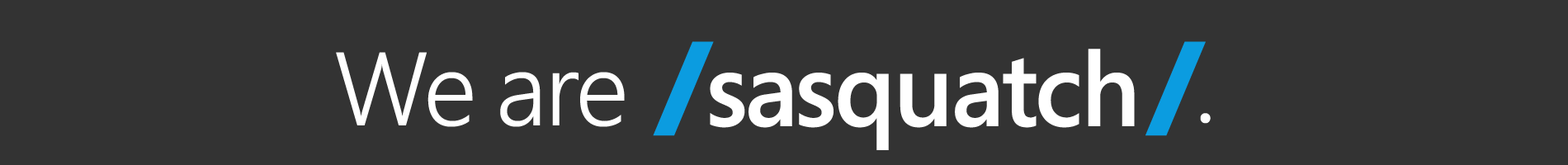
<style>
.page{position:relative;width:1568px;height:165px;background:#333333}
.page>*{position:absolute;margin:0}
.t1{font:114.6px "SegoeProBlack";letter-spacing:-0.025em;color:#0b9ce0}
.t2{font:104.2px "SegoePro-SemiLight";letter-spacing:-0.025em;color:#ffffff}
.t3{font:104.2px "SegoePro-Semibold";letter-spacing:-0.025em;color:#ffffff}
</style>
<div class="page">
<p class="t1" style="left:653px;top:41px;width:61px;height:95px">/</p>
<p class="t1" style="left:1145px;top:41px;width:61px;height:95px">/</p>
<p class="t2" style="left:336px;top:52px;width:289px;height:75px">We are</p>
<p class="t3" style="left:710px;top:49px;width:425px;height:101px">sasquatch</p>
<p class="t2" style="left:1200px;top:113px;width:11px;height:11px">.</p>
</div>
